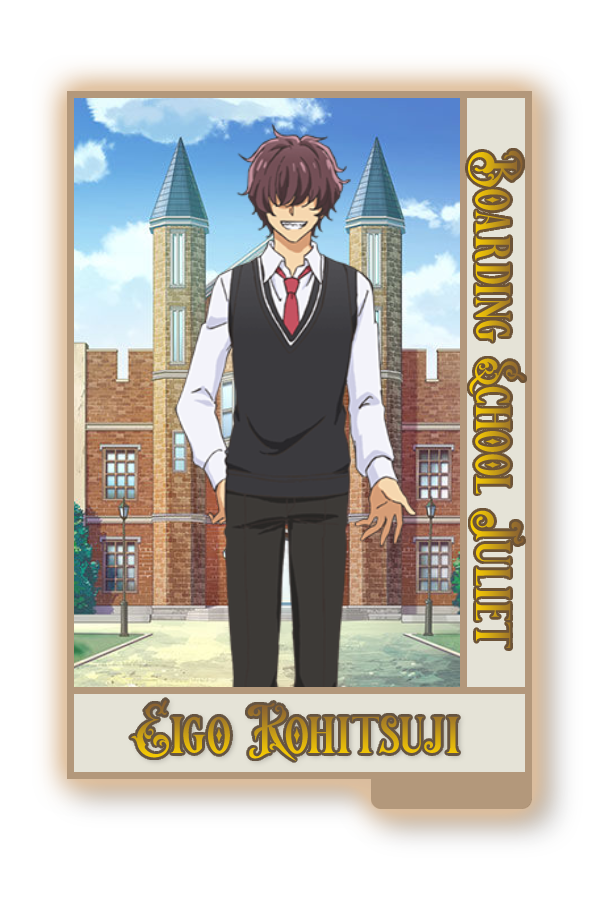
<style>
.page{position:relative;width:600px;height:900px;background:#ffffff}
.page>*{position:absolute;margin:0}
.t1{font:58.9px "VictorianDecadeDemoVersion"}
.t2{font:62.3px "VictorianDecadeDemoVersion"}
</style>
<div class="page">
<p class="t1" style="left:468px;top:150px;width:57px;height:498px;rotate:90deg">Boarding School Juliet</p>
<p class="t2" style="left:131px;top:700px;width:329px;height:62px">Eigo Kohitsuji</p>
</div>
